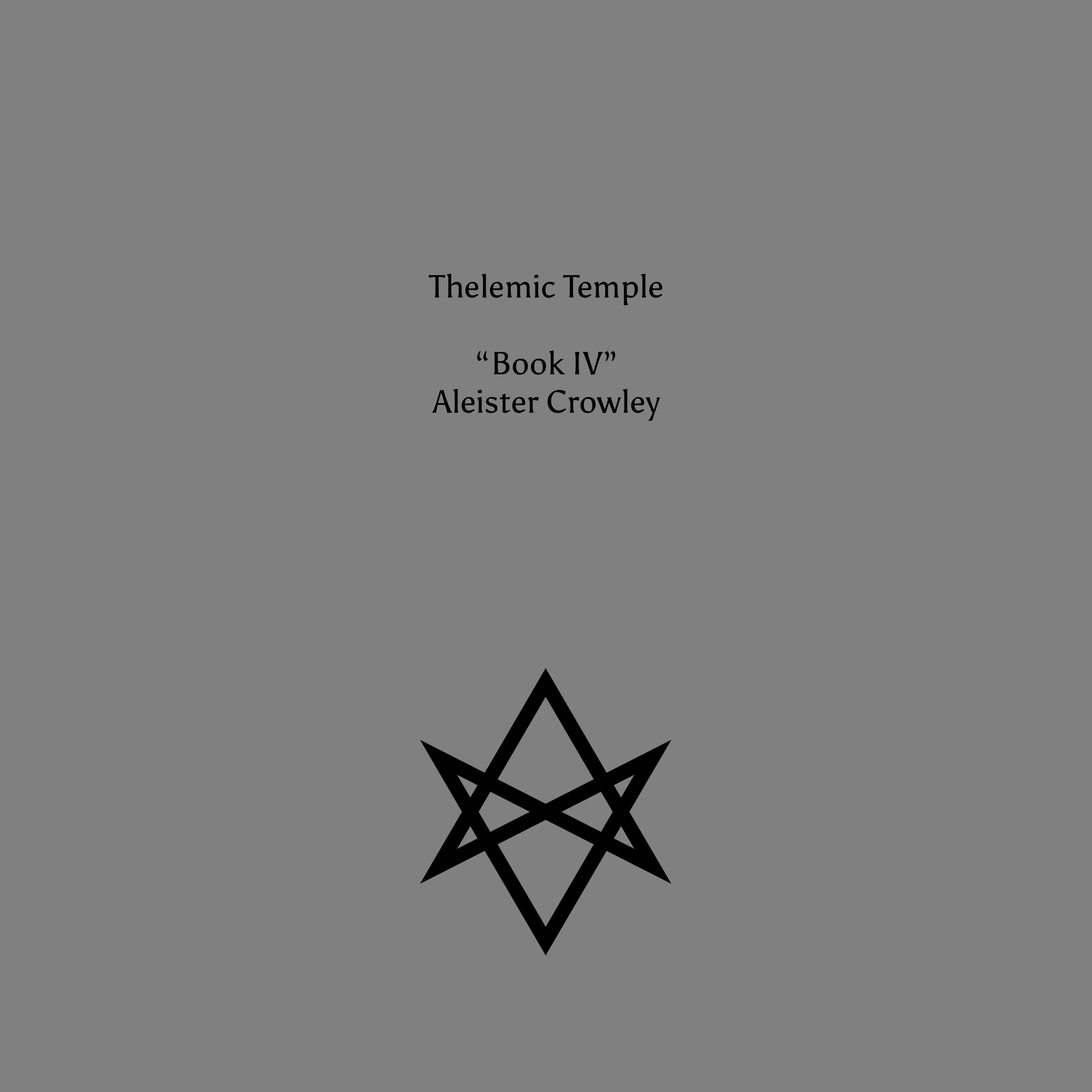
<style>
.page{position:relative;width:1092px;height:1092px;background:#808080}
.page>*{position:absolute;margin:0}
.t1{font:32px "Asul-Regular";color:#000000}
</style>
<div class="page">
<p class="t1" style="left:429px;top:274px;width:234px;height:147px;text-align:center">Thelemic Temple<br><br>“Book IV”<br>Aleister Crowley</p>
</div>
